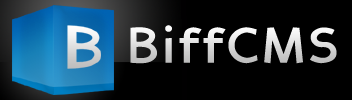
<style>
.page{position:relative;width:352px;height:100px;background:#000000}
.page>*{position:absolute;margin:0}
.t1{font:50px "PerspectiveSansBold";letter-spacing:0.05em}
</style>
<div class="page">
<p class="t1" style="left:130px;top:25px;width:207px;height:39px">BiffCMS</p>
</div>
